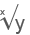
<style>
.page{position:relative;width:30px;height:35px;background:#ffffff}
.page>*{position:absolute;margin:0}
.t1{font:10px "ArialMT";color:#555555}
.t2{font:20px "ArialMT";color:#555555}
</style>
<div class="page">
<p class="t1" style="left:0px;top:10px;width:5px;height:5px">x</p>
<p class="t2" style="left:15px;top:19px;width:10px;height:15px">y</p>
</div>
